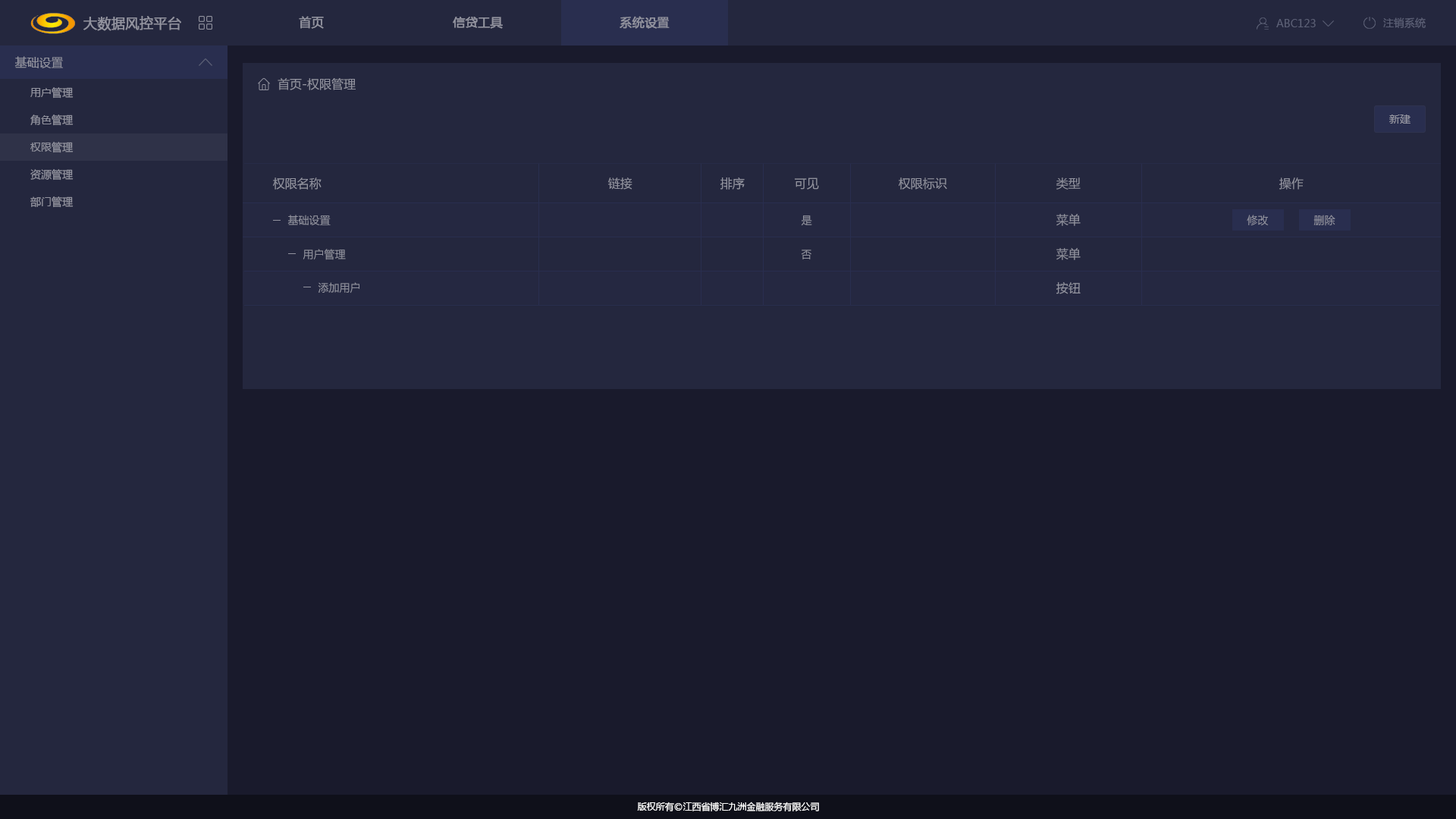
<style>
.page{position:relative;width:1456px;height:819px;background:#191a2c}
.page>*{position:absolute;margin:0}
.t1{font:13.6px "MicrosoftYaHei";color:#92939f;font-weight:bold}
.t2{font:12.1px "MicrosoftYaHei";color:#92939f;font-weight:bold}
.t3{font:10.6px "MicrosoftYaHei";color:#5c6076}
.t4{font:12.1px "MicrosoftYaHei";color:#92939f}
.t5{font:10.6px "MicrosoftYaHei";color:#92939f}
.t6{font:9.1px "MicrosoftYaHei";color:#ffffff}
</style>
<div class="page">
<p class="t1" style="left:83px;top:16px;width:98px;height:15px">大数据风控平台</p>
<p class="t2" style="left:299px;top:16px;width:25px;height:13px">首页</p>
<p class="t2" style="left:453px;top:17px;width:50px;height:12px">信贷工具</p>
<p class="t2" style="left:620px;top:16px;width:50px;height:13px">系统设置</p>
<p class="t3" style="left:1383px;top:17px;width:43px;height:11px">注销系统</p>
<p class="t3" style="left:1276px;top:19px;width:40px;height:8px">ABC123</p>
<p class="t4" style="left:14px;top:56px;width:49px;height:12px">基础设置</p>
<p class="t5" style="left:30px;top:87px;width:44px;height:12px">用户管理</p>
<p class="t4" style="left:278px;top:78px;width:78px;height:12px">首页-权限管理</p>
<p class="t5" style="left:30px;top:115px;width:44px;height:11px">角色管理</p>
<p class="t5" style="left:1389px;top:115px;width:21px;height:9px">新建</p>
<p class="t5" style="left:30px;top:142px;width:44px;height:11px">权限管理</p>
<p class="t5" style="left:30px;top:169px;width:44px;height:11px">资源管理</p>
<p class="t4" style="left:273px;top:177px;width:49px;height:13px">权限名称</p>
<p class="t4" style="left:608px;top:177px;width:24px;height:13px">链接</p>
<p class="t4" style="left:720px;top:177px;width:25px;height:13px">排序</p>
<p class="t4" style="left:795px;top:177px;width:24px;height:13px">可见</p>
<p class="t4" style="left:899px;top:177px;width:48px;height:13px">权限标识</p>
<p class="t4" style="left:1056px;top:177px;width:25px;height:13px">类型</p>
<p class="t4" style="left:1279px;top:177px;width:25px;height:13px">操作</p>
<p class="t5" style="left:30px;top:196px;width:44px;height:12px">部门管理</p>
<p class="t5" style="left:287px;top:215px;width:44px;height:10px">基础设置</p>
<p class="t5" style="left:801px;top:215px;width:11px;height:11px">是</p>
<p class="t4" style="left:1056px;top:214px;width:25px;height:12px">菜单</p>
<p class="t5" style="left:1247px;top:215px;width:22px;height:11px">修改</p>
<p class="t5" style="left:1313px;top:215px;width:22px;height:11px">删除</p>
<p class="t5" style="left:303px;top:249px;width:43px;height:11px">用户管理</p>
<p class="t5" style="left:801px;top:249px;width:10px;height:10px">否</p>
<p class="t4" style="left:1056px;top:248px;width:25px;height:12px">菜单</p>
<p class="t5" style="left:318px;top:282px;width:41px;height:11px">添加用户</p>
<p class="t4" style="left:1056px;top:282px;width:25px;height:12px">按钮</p>
<p class="t6" style="left:637px;top:802px;width:182px;height:9px">版权所有©江西省博汇九洲金融服务有限公司</p>
</div>
